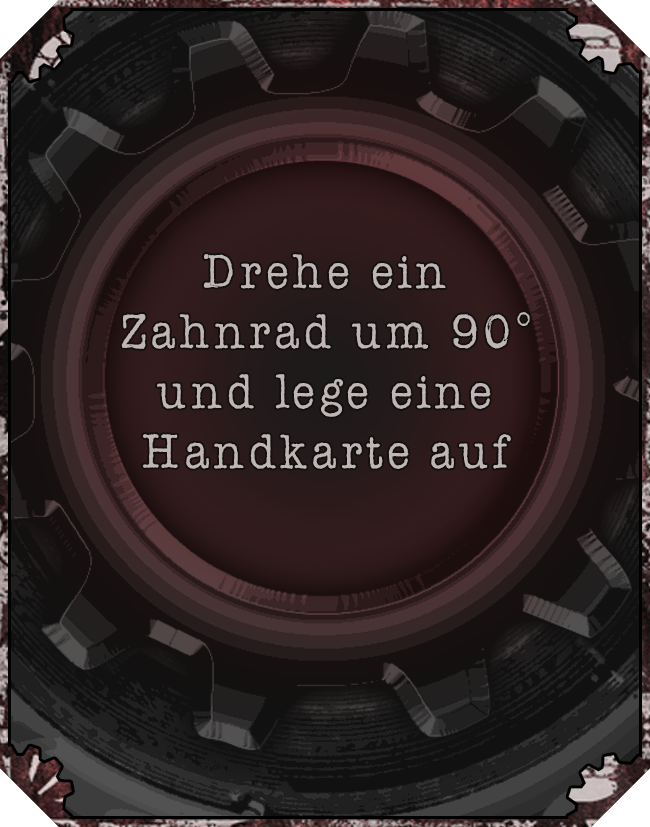
<style>
.page{position:relative;width:650px;height:827px}
.page>*{position:absolute;margin:0}
.t1{font:50px "AmerTypewriterITCbyBT-Medium";letter-spacing:0.02em;color:#c0b5b5}
</style>
<div class="page">
<p class="t1" style="left:121px;top:254px;width:409px;height:215px;text-align:center">Drehe ein Zahnrad um 90° und lege eine Handkarte auf den Schrott.</p>
</div>
